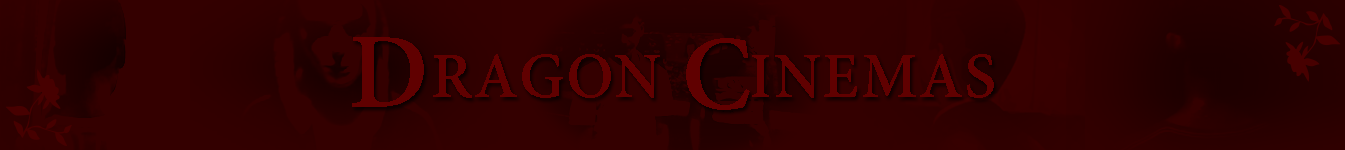
<style>
.page{position:relative;width:1345px;height:150px;background:#340000}
.page>*{position:absolute;margin:0}
.t1{font:70px "AdobeDevanagari-Bold";color:#600000}
.t2{font:117px "AdobeDevanagari-Bold";color:#600000}
</style>
<div class="page">
<p class="t1" style="left:352px;top:37px;width:642px;height:73px"><span class="t2">D</span>RAGON <span class="t2">C</span>INEMAS</p>
</div>
